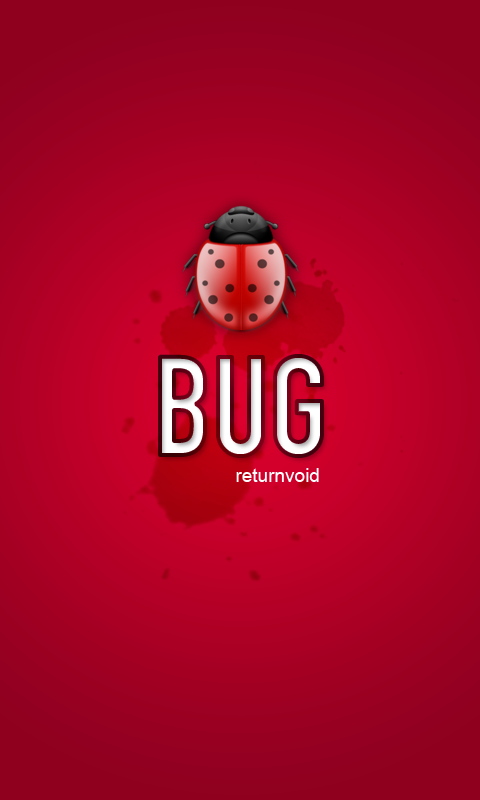
<style>
.page{position:relative;width:480px;height:800px}
.page>*{position:absolute;margin:0}
.t1{font:137px "DINEngschrift"}
.t2{font:19px "ArialMT";color:#ffffff}
</style>
<div class="page">
<p class="t1" style="left:160px;top:356px;width:162px;height:100px">BUG</p>
<p class="t2" style="left:236px;top:468px;width:83px;height:14px">returnvoid</p>
</div>
